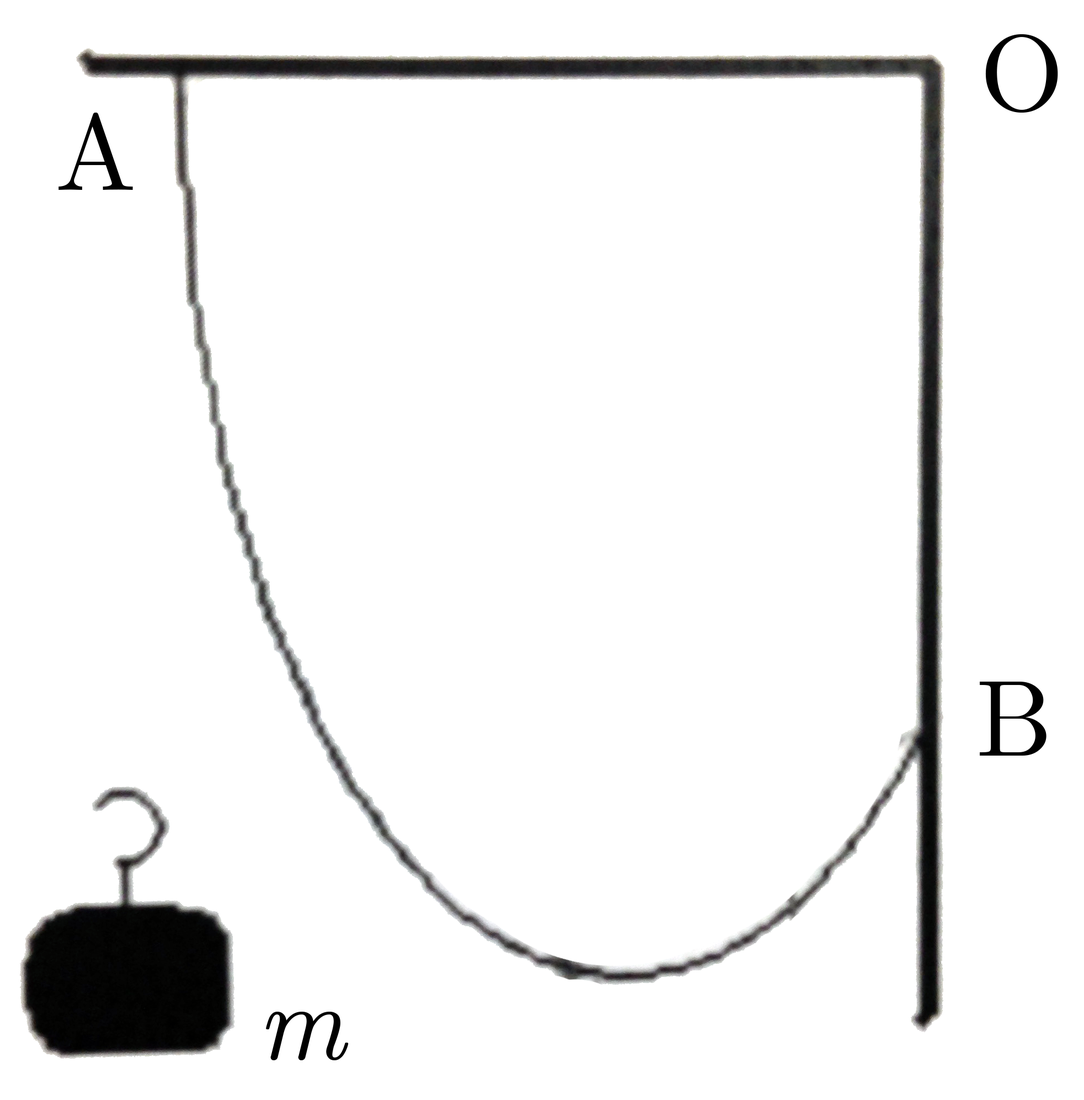
<style>
.page{position:relative;width:1084px;height:1100px;background:#ffffff}
.page>*{position:absolute;margin:0}
.t1{font:108.2px "CMUSerif-Roman";color:#000000}
.t2{font:108.2px "CMUSerif-Italic";color:#000000}
</style>
<div class="page">
<p class="t1" style="left:986px;top:34px;width:72px;height:79px">O</p>
<p class="t1" style="left:58px;top:113px;width:75px;height:77px">A</p>
<p class="t1" style="left:980px;top:681px;width:67px;height:74px">B</p>
<p class="t2" style="left:266px;top:1011px;width:83px;height:49px">m</p>
</div>
